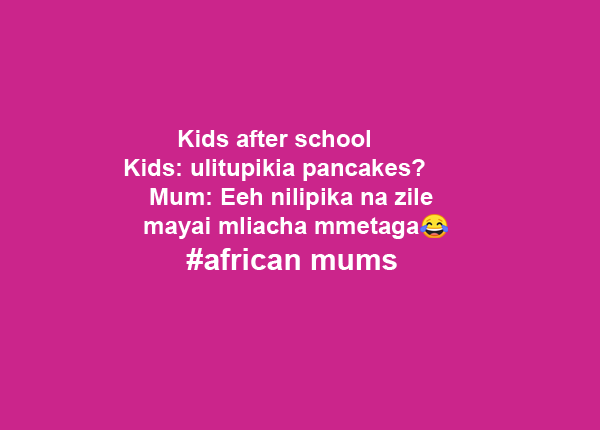
<style>
.page{position:relative;width:600px;height:430px;background:#cb258b}
.page>*{position:absolute;margin:0}
.t1{font:24px "Arial-BoldMT";color:#ffffff}
.t2{font:30px "Arial-BoldMT";color:#ffffff}
</style>
<div class="page">
<p class="t1" style="left:124px;top:130px;width:309px;height:140px;text-align:center">Kids after school<br>Kids: ulitupikia pancakes?<br>     Mum: Eeh nilipika na zile <br>  mayai mliacha mmetaga<br><span class="t2"> #african mums</span></p>
</div>
